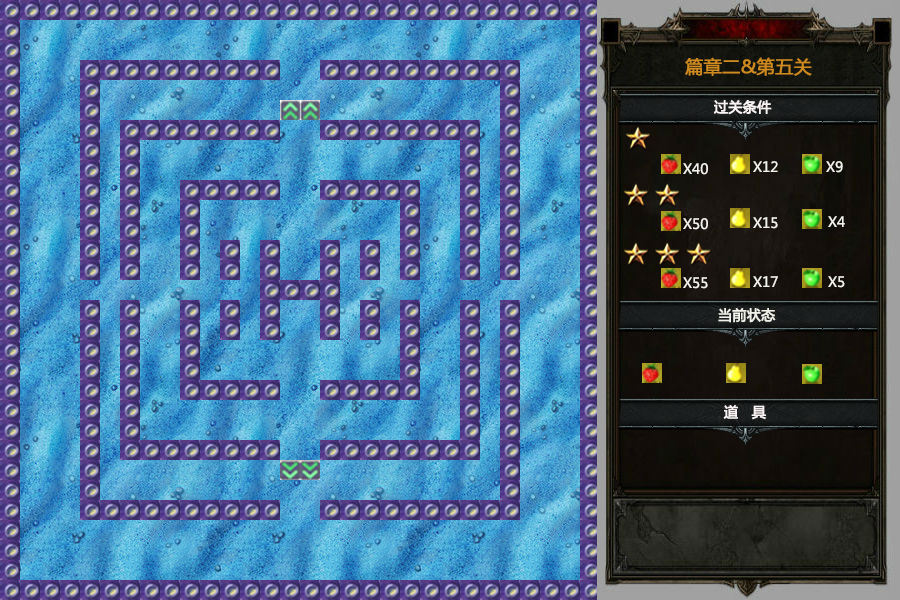
<style>
.page{position:relative;width:900px;height:600px}
.page>*{position:absolute;margin:0}
.t1{font:18px "MicrosoftYaHei";color:#cf8b20;font-weight:bold}
.t2{font:14px "MicrosoftYaHei";color:#f9f3f3;font-weight:bold}
.t3{font:14px "MicrosoftYaHei";color:#f1f0e9}
.t4{font:14px "MicrosoftYaHei";color:#f1f0e9;font-weight:bold}
</style>
<div class="page">
<p class="t1" style="left:685px;top:57px;width:127px;height:19px">篇章二&amp;第五关</p>
<p class="t2" style="left:714px;top:100px;width:58px;height:15px">过关条件</p>
<p class="t3" style="left:753px;top:161px;width:25px;height:11px">X12</p>
<p class="t3" style="left:826px;top:161px;width:17px;height:12px">X9</p>
<p class="t3" style="left:683px;top:163px;width:25px;height:12px">X40</p>
<p class="t3" style="left:683px;top:218px;width:25px;height:12px">X50</p>
<p class="t3" style="left:753px;top:217px;width:25px;height:12px">X15</p>
<p class="t3" style="left:828px;top:216px;width:17px;height:11px">X4</p>
<p class="t3" style="left:683px;top:277px;width:25px;height:12px">X55</p>
<p class="t3" style="left:753px;top:276px;width:25px;height:11px">X17</p>
<p class="t3" style="left:828px;top:276px;width:17px;height:12px">X5</p>
<p class="t4" style="left:718px;top:308px;width:58px;height:15px">当前状态</p>
<p class="t2" style="left:723px;top:405px;width:43px;height:15px">道   具</p>
</div>
